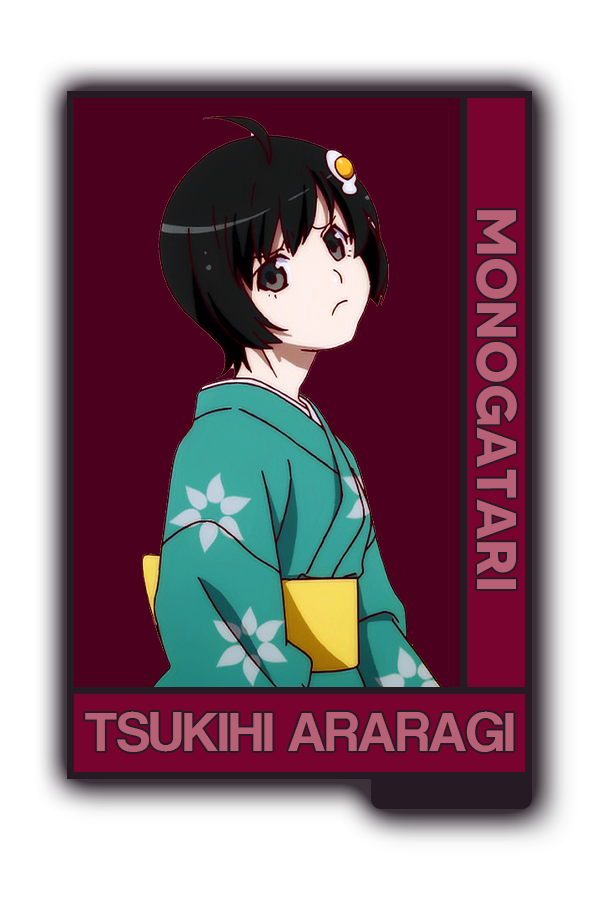
<style>
.page{position:relative;width:600px;height:900px;background:#4b011d}
.page>*{position:absolute;margin:0}
.t1{font:55.8px "MADETOMMY-Bold";color:#b86076}
.t2{font:57.8px "CoolveticaRg-Regular";color:#b86076}
</style>
<div class="page">
<p class="t1" style="left:476px;top:210px;width:41px;height:379px;rotate:90deg">MONOGATARI</p>
<p class="t2" style="left:85px;top:711px;width:429px;height:41px">TSUKIHI ARARAGI</p>
</div>
